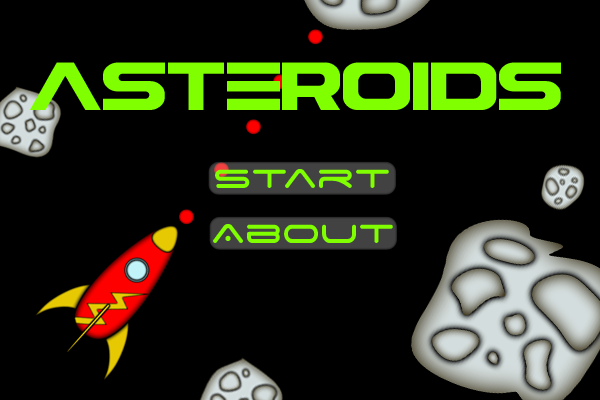
<style>
.page{position:relative;width:600px;height:400px;background:#000000}
.page>*{position:absolute;margin:0}
.t1{font:56.5px "Astera";color:#7fff00}
.t2{font:41.7px "SpaceAge";color:#7fff00}
</style>
<div class="page">
<p class="t1" style="left:30px;top:62px;width:531px;height:48px">Asteroids</p>
<p class="t2" style="left:215px;top:169px;width:174px;height:19px">start</p>
<p class="t2" style="left:213px;top:224px;width:180px;height:19px">About</p>
</div>
